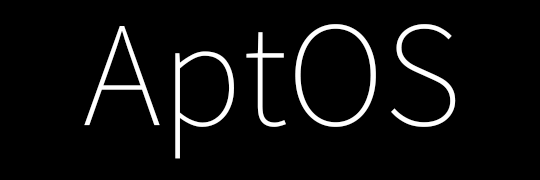
<style>
.page{position:relative;width:540px;height:180px;background:#000000}
.page>*{position:absolute;margin:0}
.t1{font:150px "SourceSansPro-ExtraLight";color:#ffffff}
</style>
<div class="page">
<p class="t1" style="left:84px;top:24px;width:372px;height:135px">AptOS</p>
</div>
